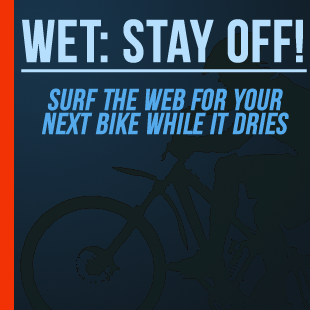
<style>
.page{position:relative;width:310px;height:310px}
.page>*{position:absolute;margin:0}
.t1{font:30px "BebasNeue";color:#55aaec;font-weight:bold;font-style:italic}
.t2{font:60px "BebasNeue";color:#b6dffe;font-weight:bold;text-decoration:underline}
</style>
<div class="page">
<p class="t1" style="left:21px;top:19px;width:286px;height:116px;text-align:center"><span class="t2">Wet: Stay Off!<br></span>Surf the web for your<br>Next Bike while it dries</p>
</div>
